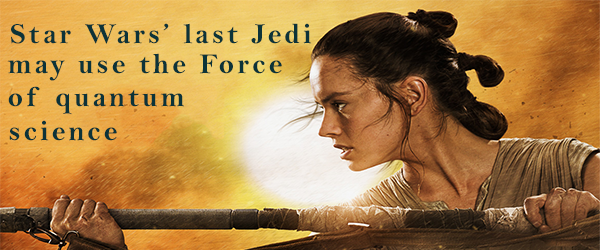
<style>
.page{position:relative;width:600px;height:250px}
.page>*{position:absolute;margin:0}
.t1{font:29px "BellMTBold";letter-spacing:0.1em;color:#0d3338}
</style>
<div class="page">
<p class="t1" style="left:11px;top:23px;width:301px;height:21px">Star Wars’ last Jedi</p>
<p class="t1" style="left:7px;top:53px;width:275px;height:28px">may use the Force</p>
<p class="t1" style="left:8px;top:86px;width:176px;height:28px">of quantum</p>
<p class="t1" style="left:9px;top:120px;width:108px;height:21px">science</p>
</div>
